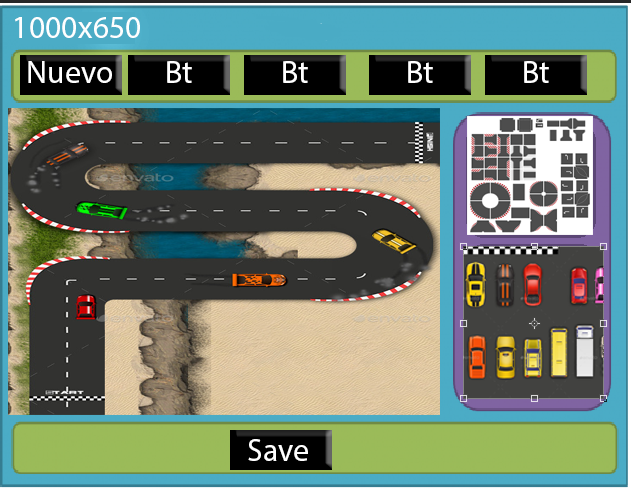
<style>
.page{position:relative;width:633px;height:489px}
.page>*{position:absolute;margin:0}
.t1{font:32px "MyriadPro-Regular";color:#ffffff}
</style>
<div class="page">
<p class="t1" style="left:15px;top:17px;width:125px;height:21px">1000x650z</p>
<p class="t1" style="left:28px;top:61px;width:84px;height:22px">Nuevo</p>
<p class="t1" style="left:167px;top:61px;width:25px;height:22px">Bt</p>
<p class="t1" style="left:283px;top:61px;width:25px;height:22px">Bt</p>
<p class="t1" style="left:408px;top:61px;width:25px;height:22px">Bt</p>
<p class="t1" style="left:524px;top:61px;width:25px;height:22px">Bt</p>
<p class="t1" style="left:248px;top:439px;width:60px;height:22px">Save</p>
</div>
